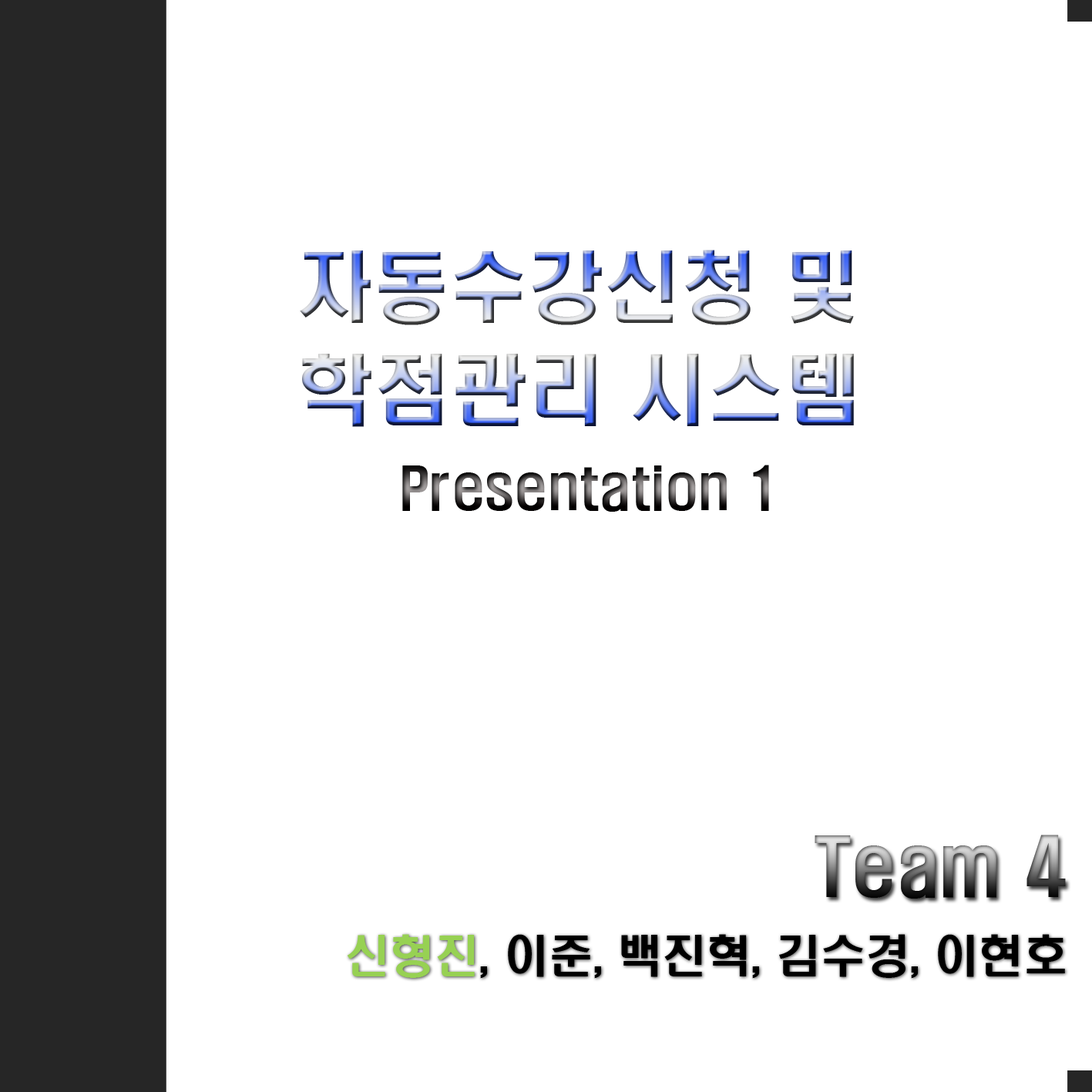
<style>
.page{position:relative;width:1092px;height:1092px;background:#ffffff}
.page>*{position:absolute;margin:0}
.t1{font:77.1px "H2hdrM"}
.t2{font:53.9px "H2hdrM"}
.t3{font:73.2px "H2hdrM"}
.t4{font:44.7px "H2hdrM";color:#000000}
.t5{font:44.7px "H2hdrM";color:#97d153}
</style>
<div class="page">
<p class="t1" style="left:300px;top:250px;width:554px;height:75px">자동수강신청 및</p>
<p class="t1" style="left:302px;top:354px;width:552px;height:73px">학점관리 시스템</p>
<p class="t2" style="left:402px;top:465px;width:367px;height:47px">Presentation 1</p>
<p class="t3" style="left:815px;top:835px;width:251px;height:64px">Team 4</p>
<p class="t4" style="left:347px;top:934px;width:718px;height:45px"><span class="t5">신형진</span>, 이준, 백진혁, 김수경, 이현호</p>
</div>
